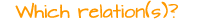
<style>
.page{position:relative;width:200px;height:24px;background:#ffffff}
.page>*{position:absolute;margin:0}
.t1{font:16px "ArchitectsDaughter";color:#ff9900}
</style>
<div class="page">
<p class="t1" style="left:15px;top:0px;width:163px;height:19px">Which relation(s)?</p>
</div>
